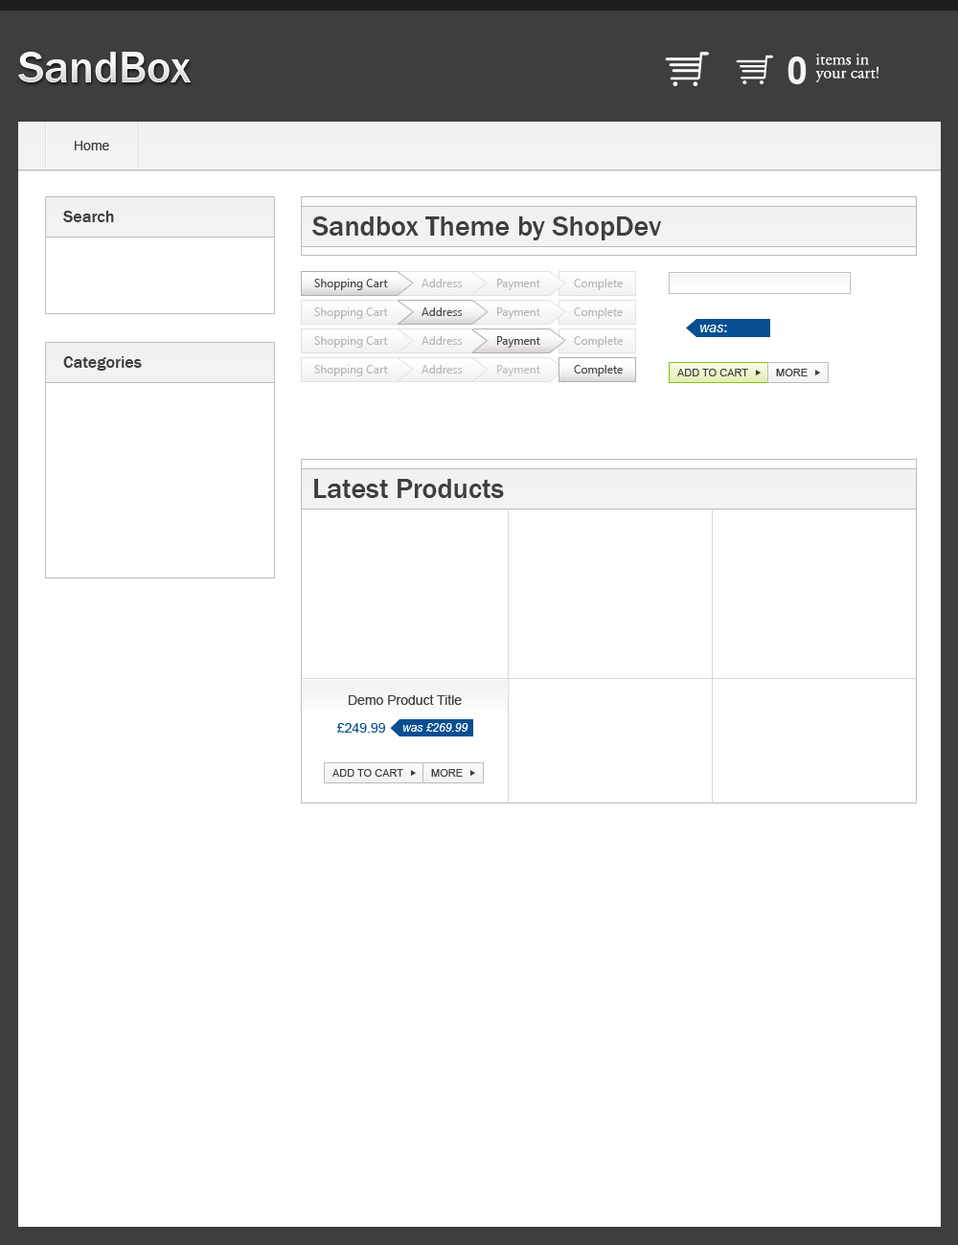
<style>
.page{position:relative;width:958px;height:1245px;background:#ffffff}
.page>*{position:absolute;margin:0}
.t1{font:46px "FranklinGothic-Medium";color:#eeeeee}
.t2{font:17.2px "AGaramondPro-Regular";color:#fefefe}
.t3{font:38.3px "Arial-BoldMT";color:#f4f4f4}
.t4{font:17.2px "AGaramondPro-Regular";color:#ffffff}
.t5{font:13.4px "ArialMT";color:#3e3e3e}
.t6{font:17.2px "FranklinGothic-Medium";color:#3e3e3e}
.t7{font:28.7px "FranklinGothic-Medium";color:#3e3e3e}
.t8{font:11.5px "SegoeUI";color:#494949}
.t9{font:11.5px "SegoeUI";color:#b6b6b6}
.t10{font:13.4px "Arial-ItalicMT";color:#ffffff}
.t11{font:13.4px "Arial-BoldMT";color:#ffffff}
.t12{font:11.5px "SegoeUI";color:#bfbfbf}
.t13{font:10.5px "ArialMT";color:#3e3e3e}
.t14{font:13.4px "ArialMT";color:#074f92}
.t15{font:11.5px "Arial-ItalicMT";color:#ffffff}
</style>
<div class="page">
<p class="t1" style="left:18px;top:52px;width:173px;height:30px">SandBox</p>
<p class="t2" style="left:816px;top:54px;width:53px;height:11px">items in</p>
<p class="t3" style="left:787px;top:57px;width:19px;height:27px">0</p>
<p class="t4" style="left:815px;top:66px;width:63px;height:16px">your cart!</p>
<p class="t5" style="left:75px;top:141px;width:34px;height:9px">Home</p>
<p class="t6" style="left:63px;top:211px;width:51px;height:11px">Search</p>
<p class="t7" style="left:312px;top:216px;width:349px;height:24px">Sandbox Theme by ShopDev</p>
<p class="t8" style="left:314px;top:279px;width:74px;height:11px">Shopping Cart</p>
<p class="t9" style="left:421px;top:279px;width:41px;height:8px">Address</p>
<p class="t9" style="left:497px;top:279px;width:43px;height:11px">Payment</p>
<p class="t9" style="left:574px;top:279px;width:49px;height:11px">Complete</p>
<p class="t9" style="left:314px;top:307px;width:74px;height:12px">Shopping Cart</p>
<p class="t8" style="left:421px;top:307px;width:41px;height:9px">Address</p>
<p class="t9" style="left:497px;top:307px;width:43px;height:12px">Payment</p>
<p class="t9" style="left:574px;top:307px;width:49px;height:12px">Complete</p>
<p class="t10" style="left:700px;top:325px;width:27px;height:7px">was<span class="t11">:</span></p>
<p class="t9" style="left:314px;top:336px;width:74px;height:12px">Shopping Cart</p>
<p class="t9" style="left:421px;top:336px;width:41px;height:9px">Address</p>
<p class="t8" style="left:497px;top:336px;width:43px;height:12px">Payment</p>
<p class="t9" style="left:574px;top:336px;width:49px;height:12px">Complete</p>
<p class="t6" style="left:63px;top:356px;width:79px;height:15px">Categories</p>
<p class="t9" style="left:314px;top:365px;width:74px;height:11px">Shopping Cart</p>
<p class="t9" style="left:421px;top:365px;width:41px;height:9px">Address</p>
<p class="t12" style="left:497px;top:365px;width:43px;height:11px">Payment</p>
<p class="t8" style="left:574px;top:365px;width:49px;height:11px">Complete</p>
<p class="t13" style="left:677px;top:369px;width:71px;height:7px">ADD TO CART</p>
<p class="t13" style="left:776px;top:369px;width:31px;height:7px">MORE</p>
<p class="t7" style="left:314px;top:479px;width:190px;height:19px">Latest Products</p>
<p class="t5" style="left:349px;top:694px;width:113px;height:11px">Demo Product Title</p>
<p class="t14" style="left:337px;top:723px;width:48px;height:10px">£249.99</p>
<p class="t15" style="left:402px;top:723px;width:66px;height:9px">was £269.99</p>
<p class="t13" style="left:332px;top:769px;width:71px;height:8px">ADD TO CART</p>
<p class="t13" style="left:431px;top:769px;width:32px;height:8px">MORE</p>
</div>
